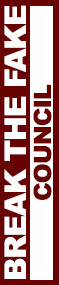
<style>
.page{position:relative;width:59px;height:285px;background:#670303}
.page>*{position:absolute;margin:0}
.t1{font:30px "Arial-Black";letter-spacing:-0.04em;color:#fefdfd;text-transform:uppercase}
.t2{font:24px "Arial-Black";letter-spacing:-0.04em;color:#670303;text-transform:uppercase}
</style>
<div class="page">
<p class="t1" style="left:4px;top:5px;width:22px;height:274px;rotate:-90deg">BREAK THE FAKE</p>
<p class="t2" style="left:33px;top:84px;width:19px;height:116px;rotate:-90deg">Council</p>
</div>
